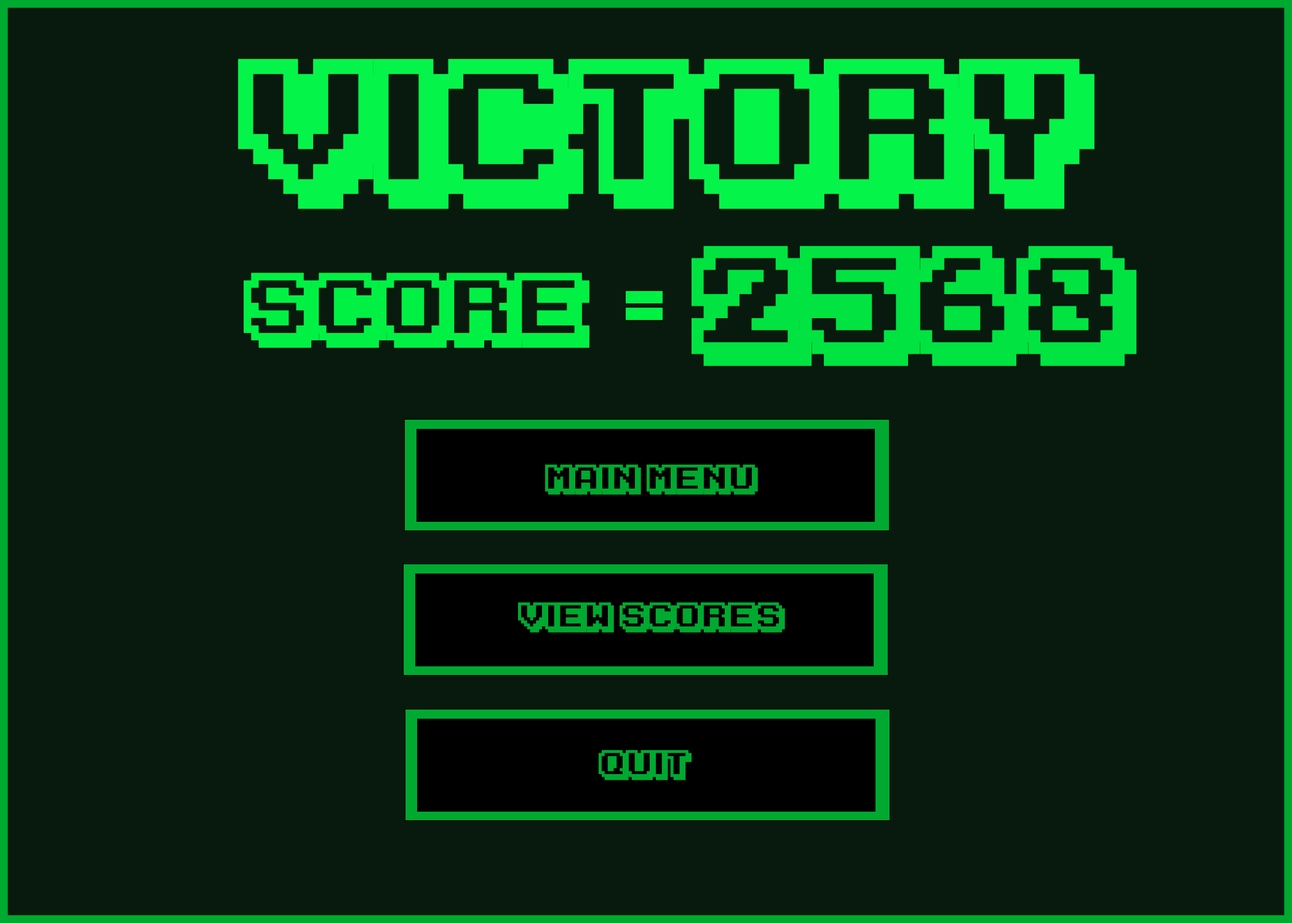
<style>
.page{position:relative;width:1292px;height:923px;background:#08190d}
.page>*{position:absolute;margin:0}
.t1{font:153.8px "KarmaticArcade";color:#05f449}
.t2{font:123.1px "KarmaticArcade";color:#00e341}
.t3{font:76.9px "KarmaticArcade";color:#00f144}
.t4{font:76.9px "KarmaticArcade";color:#00a930}
.t5{font:30.8px "KarmaticArcade";color:#00a930}
</style>
<div class="page">
<p class="t1" style="left:238px;top:58px;width:857px;height:151px">victory</p>
<p class="t2" style="left:692px;top:245px;width:445px;height:121px">2568</p>
<p class="t3" style="left:244px;top:273px;width:345px;height:75px">Score <span class="t4">::</span></p>
<p class="t5" style="left:545px;top:465px;width:213px;height:30px">Main Menu</p>
<p class="t5" style="left:518px;top:602px;width:267px;height:30px">View Scores</p>
<p class="t5" style="left:599px;top:750px;width:93px;height:30px">QUit</p>
</div>
